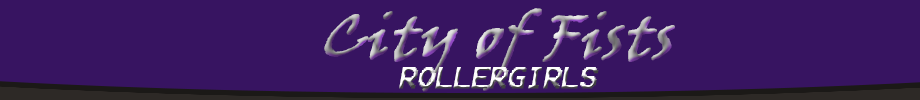
<style>
.page{position:relative;width:920px;height:100px;background:#371461}
.page>*{position:absolute;margin:0}
.t1{font:60px "VinerHandITC";font-weight:bold;font-style:italic}
.t2{font:24px "Terminal";font-weight:bold;font-style:italic}
</style>
<div class="page">
<p class="t1" style="left:324px;top:8px;width:351px;height:84px">City of Fists</p>
<p class="t2" style="left:399px;top:67px;width:200px;height:22px">ROLLERGIRLS</p>
</div>
